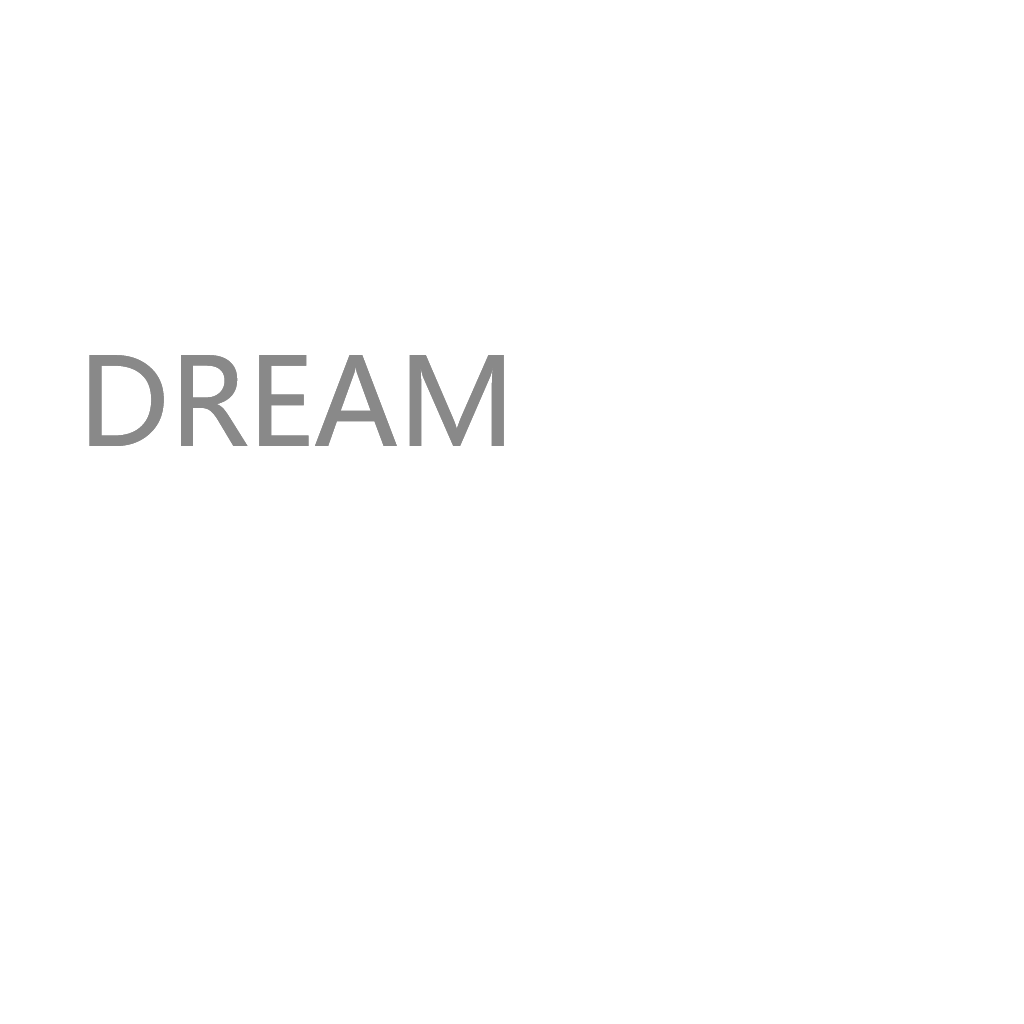
<style>
.page{position:relative;width:1024px;height:1024px;background:#ffffff}
.page>*{position:absolute;margin:0}
.t1{font:120px "MicrosoftYaHei-Regular";color:#898989}
</style>
<div class="page">
<p class="t1" style="left:89px;top:355px;width:415px;height:91px">DREAM</p>
</div>
